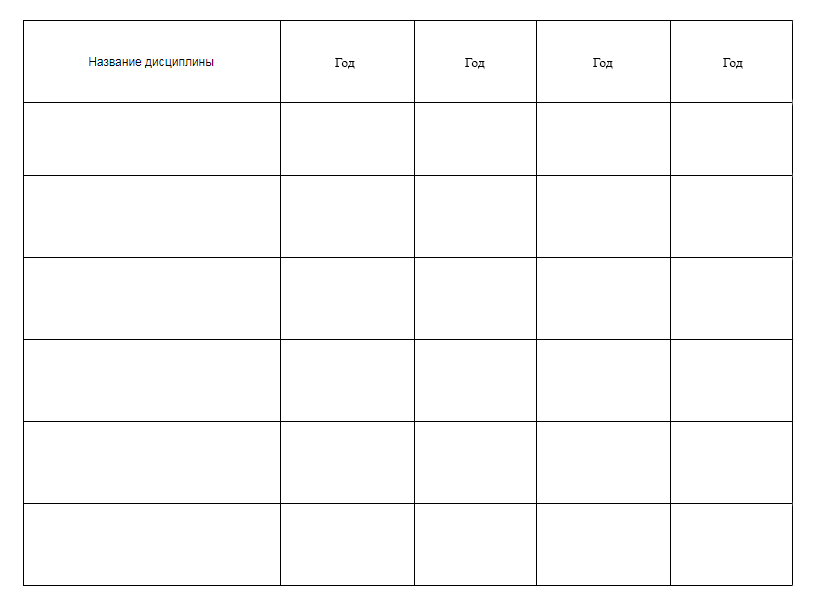
<style>
.page{position:relative;width:820px;height:604px;background:#ffffff}
.page>*{position:absolute;margin:0}
.t1{font:13.3px "TimesNewRomanPSMT";color:#000000}
</style>
<div class="page">
<p class="t1" style="left:335px;top:58px;width:20px;height:11px">Год</p>
<p class="t1" style="left:465px;top:58px;width:20px;height:11px">Год</p>
<p class="t1" style="left:593px;top:58px;width:20px;height:11px">Год</p>
<p class="t1" style="left:723px;top:58px;width:20px;height:11px">Год</p>
</div>
